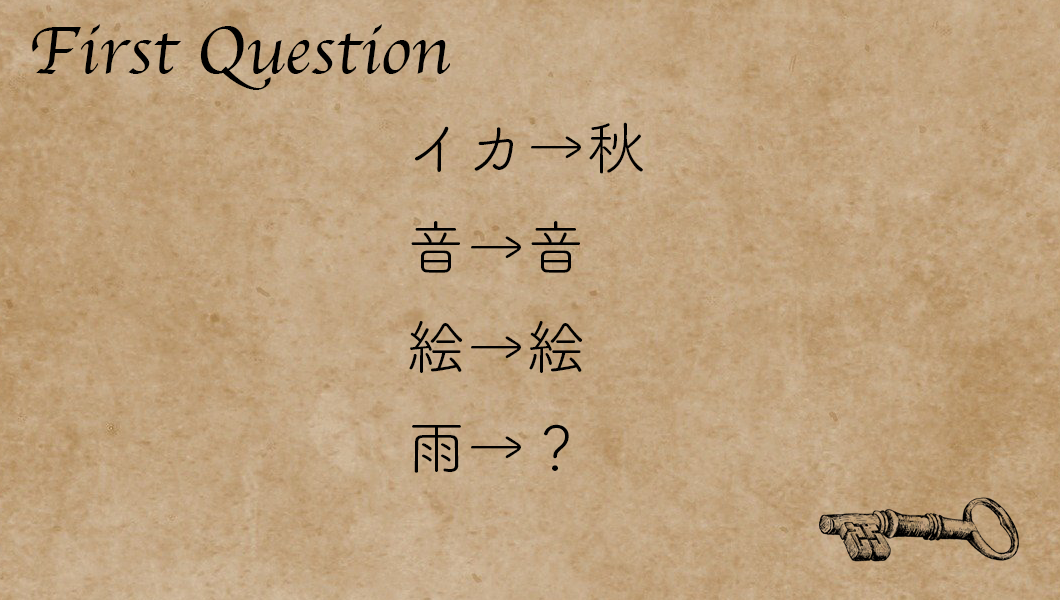
<style>
.page{position:relative;width:1060px;height:600px}
.page>*{position:absolute;margin:0}
.t1{font:70px "Apple-Chancery";color:#000000}
.t2{font:60px/100px "TsukuBRdGothic-Regular";color:#000000}
</style>
<div class="page">
<p class="t1" style="left:32px;top:24px;width:419px;height:66px">First Question</p>
<p class="t2" style="left:409px;top:122px;width:234px;height:351px">イカ→秋<br>音→音<br>絵→絵<br>雨→？</p>
</div>
